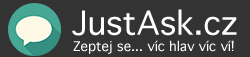
<style>
.page{position:relative;width:250px;height:57px;background:#333333}
.page>*{position:absolute;margin:0}
.t1{font:32px "Geneva";color:#ffffff}
.t2{font:13px "Geneva";color:#ffffff}
</style>
<div class="page">
<p class="t1" style="left:72px;top:9px;width:165px;height:27px">JustAsk.cz</p>
<p class="t2" style="left:73px;top:40px;width:161px;height:14px">Zeptej se... víc hlav víc ví!</p>
</div>
